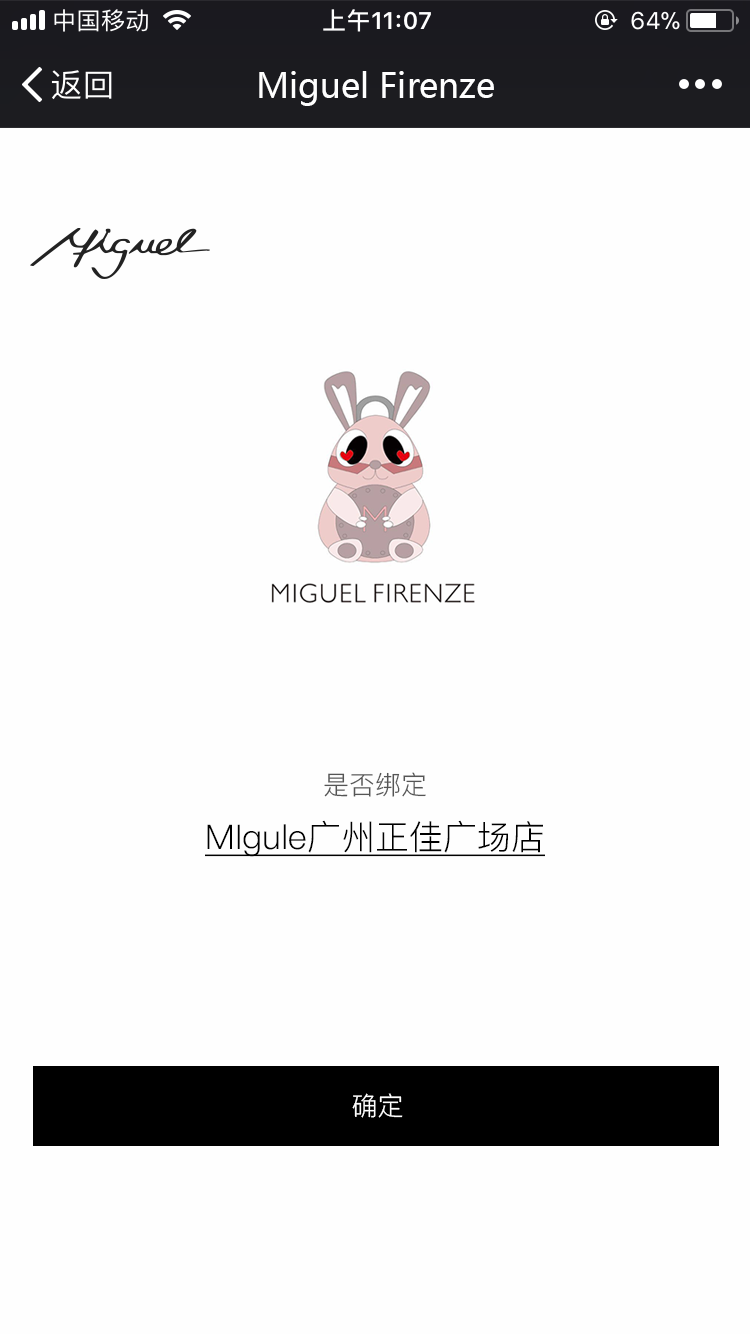
<style>
.page{position:relative;width:750px;height:1334px;background:#fefefe}
.page>*{position:absolute;margin:0}
.t1{font:34px "MicrosoftYaHei";color:#ffffff}
.t2{font:34px/48px "PingFang-SC-Regular";color:#000000;text-decoration:underline}
.t3{font:26px/48px "PingFang-SC-Regular";color:#555555}
.t4{font:26px "PingFang-SC-Regular";color:#ffffff}
</style>
<div class="page">
<p class="t1" style="left:259px;top:71px;width:235px;height:35px">Miguel Firenze</p>
<p class="t2" style="left:205px;top:772px;width:340px;height:85px;text-align:center"><span class="t3">是否绑定<br></span>MIgule广州正佳广场店</p>
<p class="t4" style="left:352px;top:1093px;width:51px;height:25px">确定</p>
</div>
